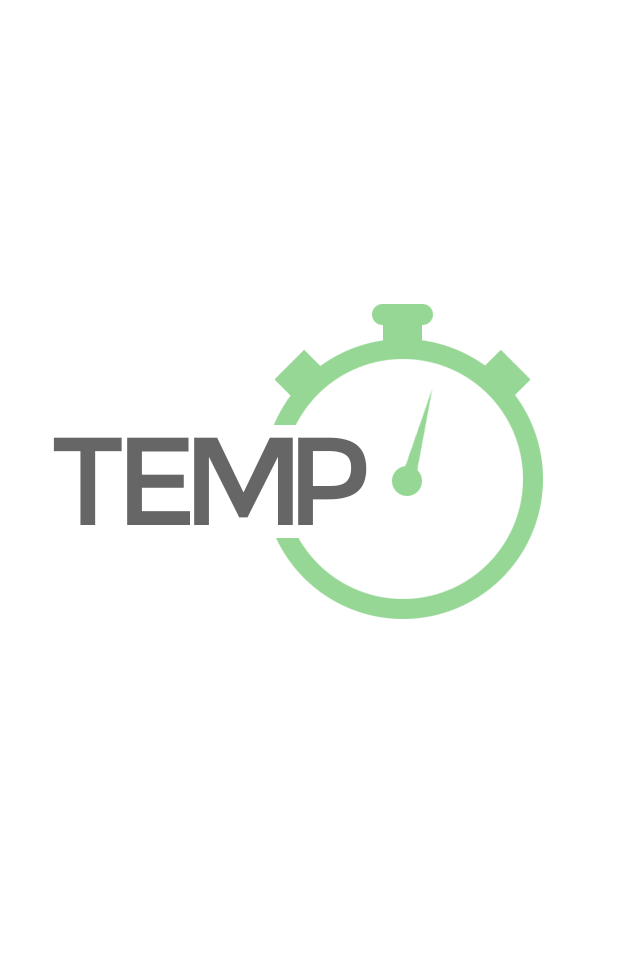
<style>
.page{position:relative;width:640px;height:960px;background:#ffffff}
.page>*{position:absolute;margin:0}
.t1{font:125px "Montserrat-Regular";color:#666666}
.t2{font:150px "Montserrat-Bold"}
</style>
<div class="page">
<p class="t1" style="left:53px;top:437px;width:69px;height:88px">T</p>
<p class="t1" style="left:127px;top:437px;width:63px;height:88px">E</p>
<p class="t1" style="left:194px;top:437px;width:99px;height:88px">M</p>
<p class="t2" style="left:289px;top:430px;width:85px;height:105px">P</p>
<p class="t1" style="left:298px;top:437px;width:69px;height:88px">P</p>
</div>
